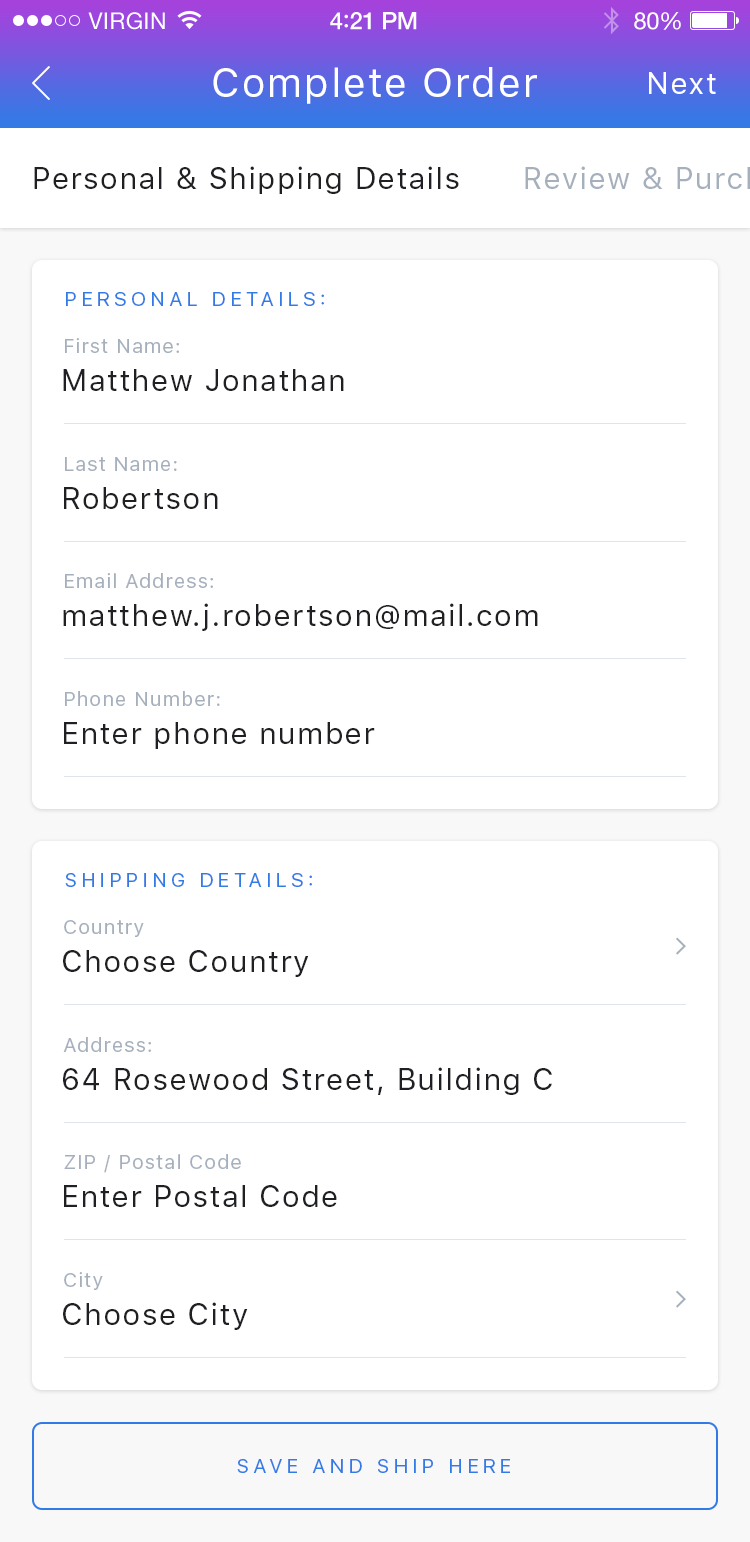
<style>
.page{position:relative;width:750px;height:1542px;background:#ffffff}
.page>*{position:absolute;margin:0}
.t1{font:40px "SFUIText-Regular";letter-spacing:0.05em;color:#ffffff}
.t2{font:30px "SFUIText-Regular";letter-spacing:0.05em;color:#ffffff}
.t3{font:30px "SFUIText-Regular";letter-spacing:0.05em;color:#1e2024}
.t4{font:20px "SFUIText-Regular";letter-spacing:0.2em;color:#327ae5;text-transform:uppercase}
.t5{font:20px "SFUIText-Regular";letter-spacing:0.05em;color:#a6b0bd}
</style>
<div class="page">
<p class="t1" style="left:213px;top:67px;width:324px;height:37px">Complete Order</p>
<p class="t2" style="left:649px;top:72px;width:67px;height:22px">Next</p>
<p class="t3" style="left:34px;top:166px;width:425px;height:28px">Personal &amp; Shipping Details</p>
<p class="t4" style="left:66px;top:292px;width:258px;height:14px">personal details:</p>
<p class="t5" style="left:65px;top:338px;width:114px;height:15px">First Name:</p>
<p class="t3" style="left:63px;top:369px;width:281px;height:22px">Matthew Jonathan</p>
<p class="t5" style="left:65px;top:457px;width:112px;height:14px">Last Name:</p>
<p class="t3" style="left:64px;top:487px;width:154px;height:22px">Robertson</p>
<p class="t5" style="left:65px;top:573px;width:148px;height:15px">Email Address:</p>
<p class="t3" style="left:63px;top:603px;width:475px;height:28px">matthew.j.robertson@mail.com</p>
<p class="t5" style="left:65px;top:691px;width:155px;height:15px">Phone Number:</p>
<p class="t3" style="left:64px;top:722px;width:311px;height:27px">Enter phone number</p>
<p class="t4" style="left:65px;top:873px;width:247px;height:14px">shipping details:</p>
<p class="t5" style="left:64px;top:920px;width:80px;height:17px">Country</p>
<p class="t3" style="left:63px;top:950px;width:246px;height:27px">Choose Country</p>
<p class="t5" style="left:63px;top:1037px;width:88px;height:15px">Address:</p>
<p class="t3" style="left:63px;top:1067px;width:489px;height:28px">64 Rosewood Street, Building C</p>
<p class="t5" style="left:64px;top:1154px;width:177px;height:19px">ZIP / Postal Code</p>
<p class="t3" style="left:64px;top:1185px;width:273px;height:22px">Enter Postal Code</p>
<p class="t5" style="left:64px;top:1272px;width:39px;height:18px">City</p>
<p class="t3" style="left:63px;top:1302px;width:185px;height:28px">Choose City</p>
<p class="t4" style="left:237px;top:1459px;width:273px;height:14px">save and ship here</p>
</div>
